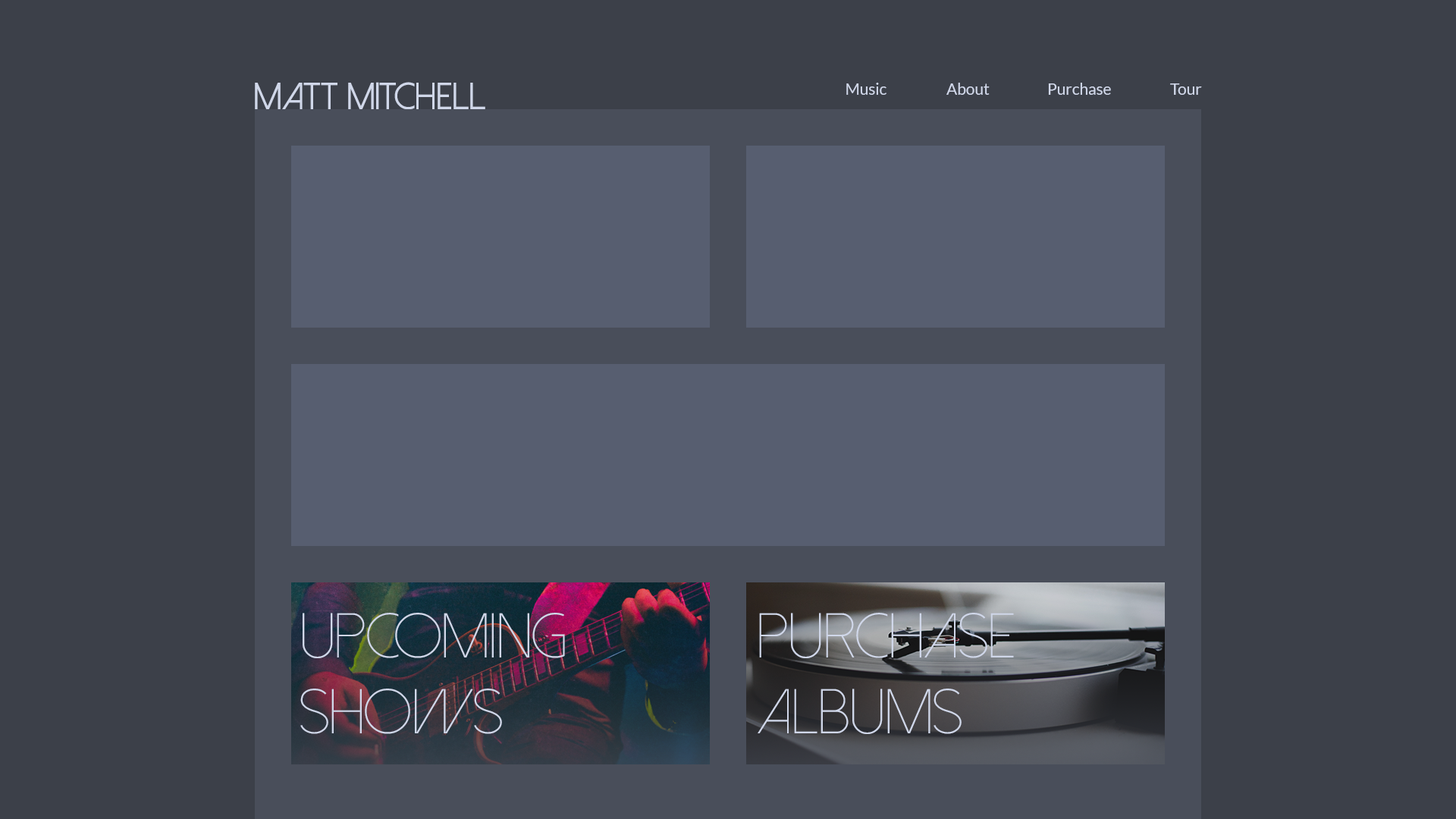
<style>
.page{position:relative;width:1456px;height:819px;background:#3c4049}
.page>*{position:absolute;margin:0}
.t1{font:9.1px "DolceVita";color:#d0d7e9}
.t2{font:15.8px "Lato-Regular";color:#d0d7e9}
.t3{font:63.2px "DolceVitaLight";color:#d0d7e9}
</style>
<div class="page">
<p class="t1" style="left:255px;top:82px;width:230px;height:28px">Matt Mitchell</p>
<p class="t2" style="left:846px;top:83px;width:40px;height:12px">Music</p>
<p class="t2" style="left:946px;top:83px;width:44px;height:12px">About</p>
<p class="t2" style="left:1048px;top:83px;width:63px;height:12px">Purchase</p>
<p class="t2" style="left:1170px;top:83px;width:32px;height:12px">Tour</p>
<p class="t3" style="left:300px;top:613px;width:265px;height:121px">Upcoming<br>Shows</p>
<p class="t3" style="left:758px;top:613px;width:256px;height:121px">Purchase <br>Albums</p>
</div>
